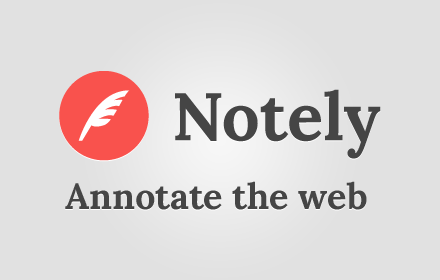
<style>
.page{position:relative;width:440px;height:280px;background:#e1e1e1}
.page>*{position:absolute;margin:0}
.t1{font:36px "Lora-Bold";color:#454545}
</style>
<div class="page">
<p class="t1" style="left:65px;top:181px;width:302px;height:29px">Annotate the web</p>
</div>
